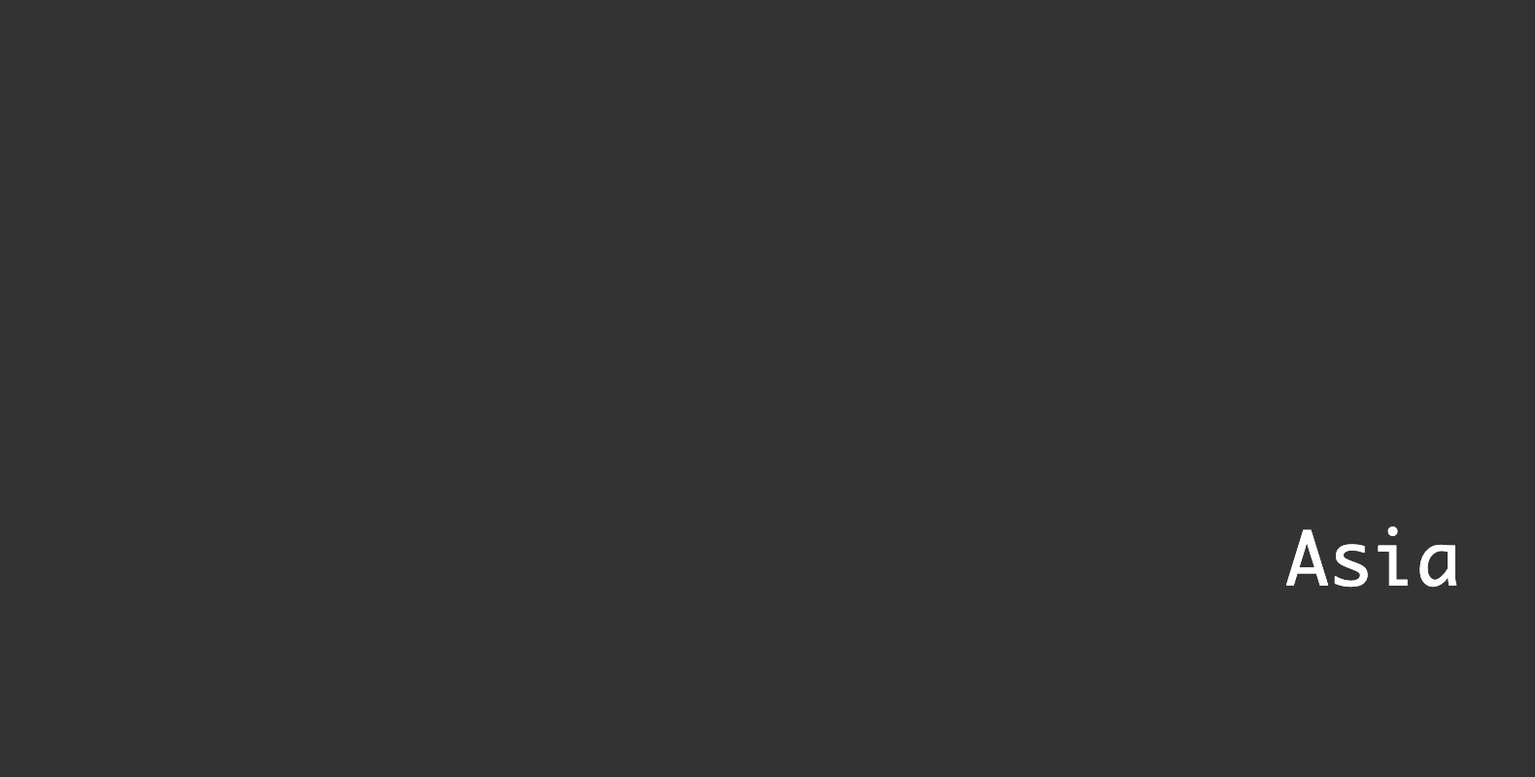
<style>
.page{position:relative;width:1535px;height:777px;background:#333333}
.page>*{position:absolute;margin:0}
.t1{font:72.8px "Ayuthaya";color:#ffffff}
</style>
<div class="page">
<p class="t1" style="left:1285px;top:526px;width:172px;height:62px">Asia</p>
</div>
